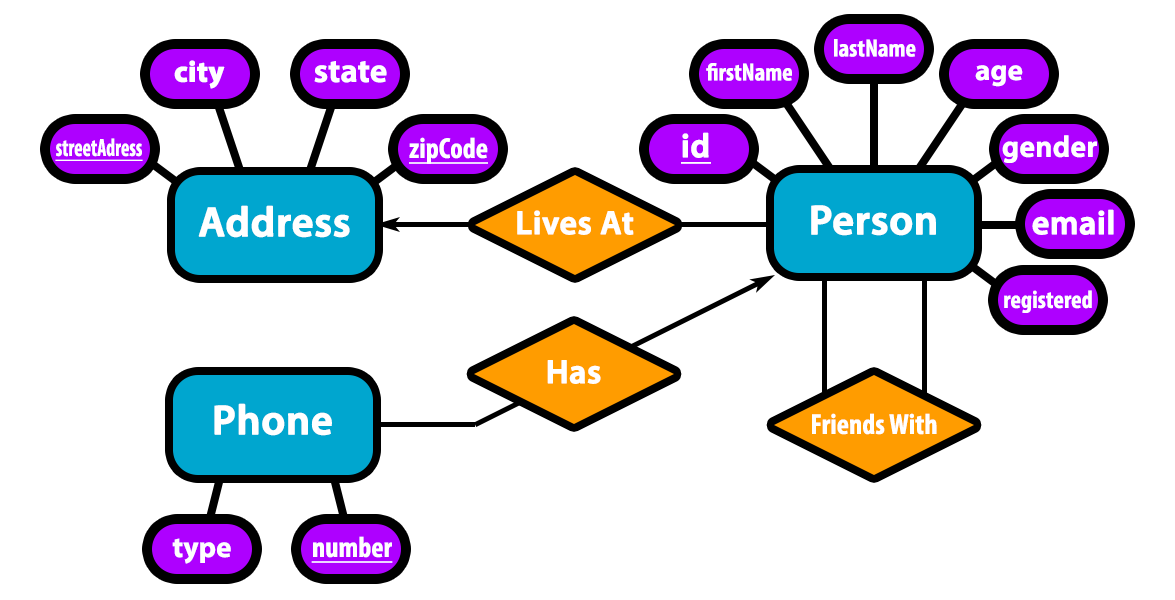
<style>
.page{position:relative;width:1175px;height:600px;background:#ffffff}
.page>*{position:absolute;margin:0}
.t1{font:25px "MyriadPro-BoldCond";color:#ffffff}
.t2{font:29.2px "MyriadPro-Bold";color:#ffffff;font-weight:bold}
.t3{font:33.3px "MyriadPro-Bold";color:#ffffff}
.t4{font:29.2px "MyriadPro-Bold";color:#ffffff}
.t5{font:29.2px "MyriadPro-BoldCond";color:#ffffff;text-decoration:underline}
.t6{font:33.3px "MyriadPro-Semibold";color:#ffffff;font-weight:bold;text-decoration:underline}
.t7{font:29.2px "MyriadPro-Semibold";color:#ffffff;font-weight:bold}
.t8{font:25px "MyriadPro-BoldCond";color:#ffffff;text-decoration:underline;scale:0.8 1}
.t9{font:41.7px "MyriadPro-Semibold";color:#ffffff;font-weight:bold}
.t10{font:33.3px "MyriadPro-Semibold";color:#ffffff;font-weight:bold}
.t11{font:29.2px "MyriadPro-BoldCond";color:#ffffff}
</style>
<div class="page">
<p class="t1" style="left:834px;top:39px;width:82px;height:18px">lastName</p>
<p class="t2" style="left:174px;top:60px;width:51px;height:29px">city</p>
<p class="t3" style="left:314px;top:61px;width:73px;height:22px">state</p>
<p class="t1" style="left:706px;top:63px;width:86px;height:18px">firstName</p>
<p class="t4" style="left:975px;top:65px;width:48px;height:22px">age</p>
<p class="t5" style="left:409px;top:137px;width:79px;height:27px">zipCode</p>
<p class="t6" style="left:681px;top:132px;width:30px;height:32px">id</p>
<p class="t7" style="left:1002px;top:135px;width:95px;height:28px">gender</p>
<p class="t8" style="left:55px;top:138px;width:88px;height:23px">streetAdress</p>
<p class="t9" style="left:198px;top:205px;width:152px;height:33px">Address</p>
<p class="t9" style="left:811px;top:205px;width:125px;height:31px">Person</p>
<p class="t10" style="left:1032px;top:209px;width:82px;height:26px">email</p>
<p class="t10" style="left:517px;top:210px;width:117px;height:25px">Lives At</p>
<p class="t1" style="left:1004px;top:290px;width:88px;height:23px">registered</p>
<p class="t10" style="left:547px;top:360px;width:54px;height:24px">Has</p>
<p class="t9" style="left:214px;top:403px;width:118px;height:33px">Phone</p>
<p class="t11" style="left:812px;top:413px;width:125px;height:22px">Friends With</p>
<p class="t4" style="left:172px;top:538px;width:59px;height:26px">type</p>
<p class="t5" style="left:311px;top:536px;width:82px;height:27px">number</p>
</div>
